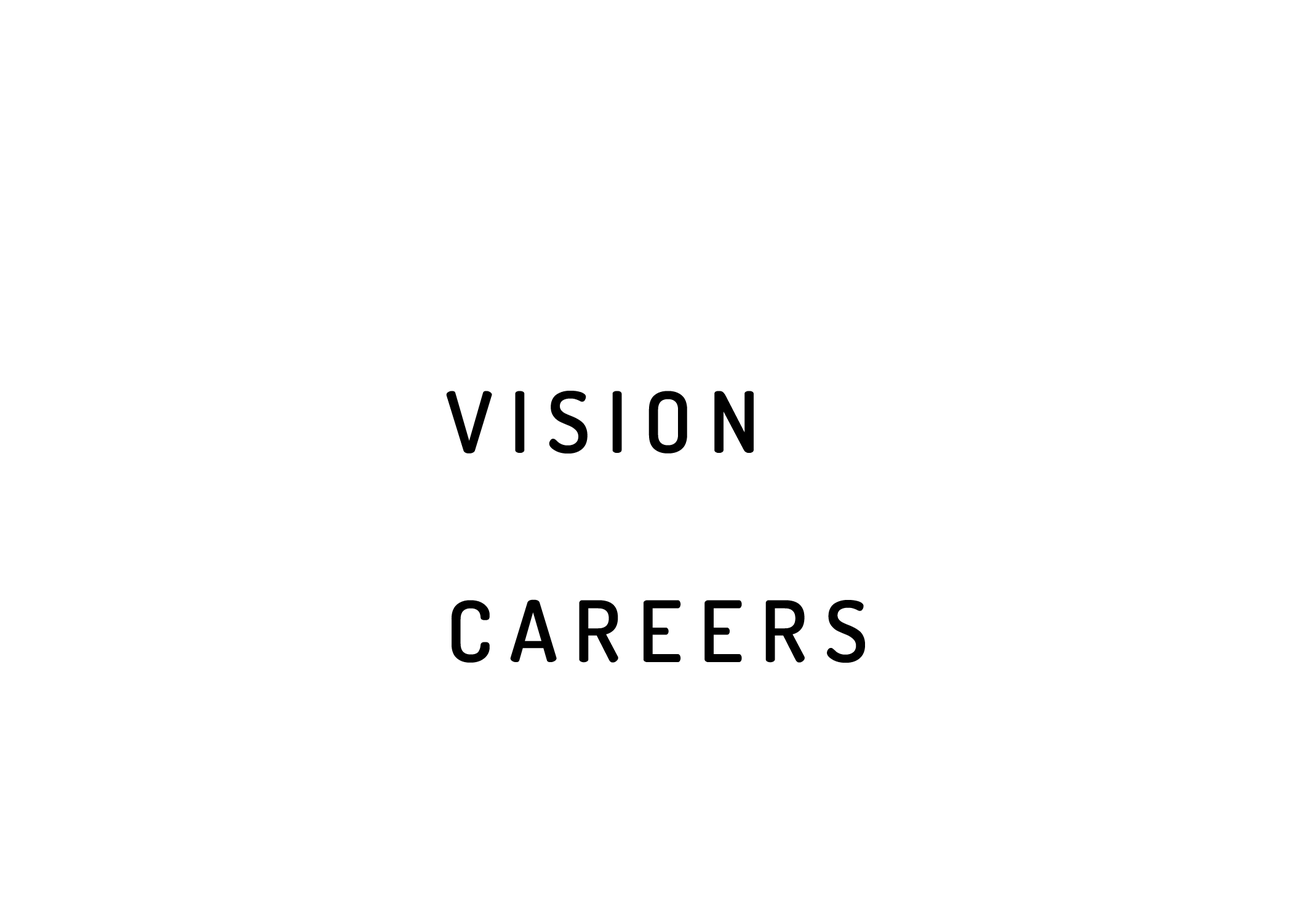
<style>
.page{position:relative;width:1292px;height:923px;background:#ffffff}
.page>*{position:absolute;margin:0}
.t1{font:84.6px "TerminalDosis-SemiBold";letter-spacing:0.2em;color:#000000}
</style>
<div class="page">
<p class="t1" style="left:446px;top:391px;width:308px;height:62px">VISION</p>
<p class="t1" style="left:451px;top:599px;width:414px;height:64px">CAREERS</p>
</div>
